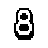
<style>
.page{position:relative;width:48px;height:48px;background:#ffffff}
.page>*{position:absolute;margin:0}
.t1{font:36px "KarmaFuture-Regular";color:#010101}
</style>
<div class="page">
<p class="t1" style="left:14px;top:8px;width:20px;height:32px">8</p>
</div>
